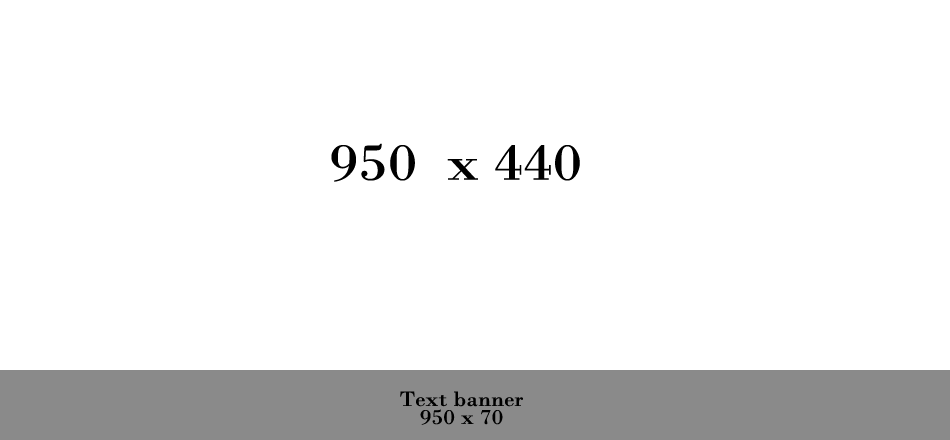
<style>
.page{position:relative;width:950px;height:440px;background:#ffffff}
.page>*{position:absolute;margin:0}
.t1{font:21.6px/18px "BodoniMT";color:#000000;scale:1.11 1}
</style>
<div class="page">
<p class="t1" style="left:400px;top:391px;width:123px;height:34px;text-align:center">Text banner<br>950 x 70</p>
</div>
